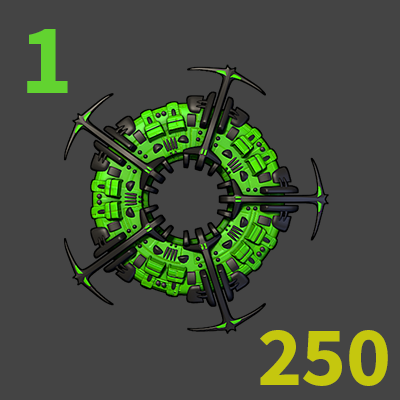
<style>
.page{position:relative;width:400px;height:400px;background:#444444}
.page>*{position:absolute;margin:0}
.t1{font:100px "SourceSansPro-Bold";color:#62d330}
.t2{font:85px "SourceSansPro-Bold";color:#c5c70e}
</style>
<div class="page">
<p class="t1" style="left:27px;top:29px;width:41px;height:64px">1</p>
<p class="t2" style="left:260px;top:330px;width:128px;height:56px">250</p>
</div>
